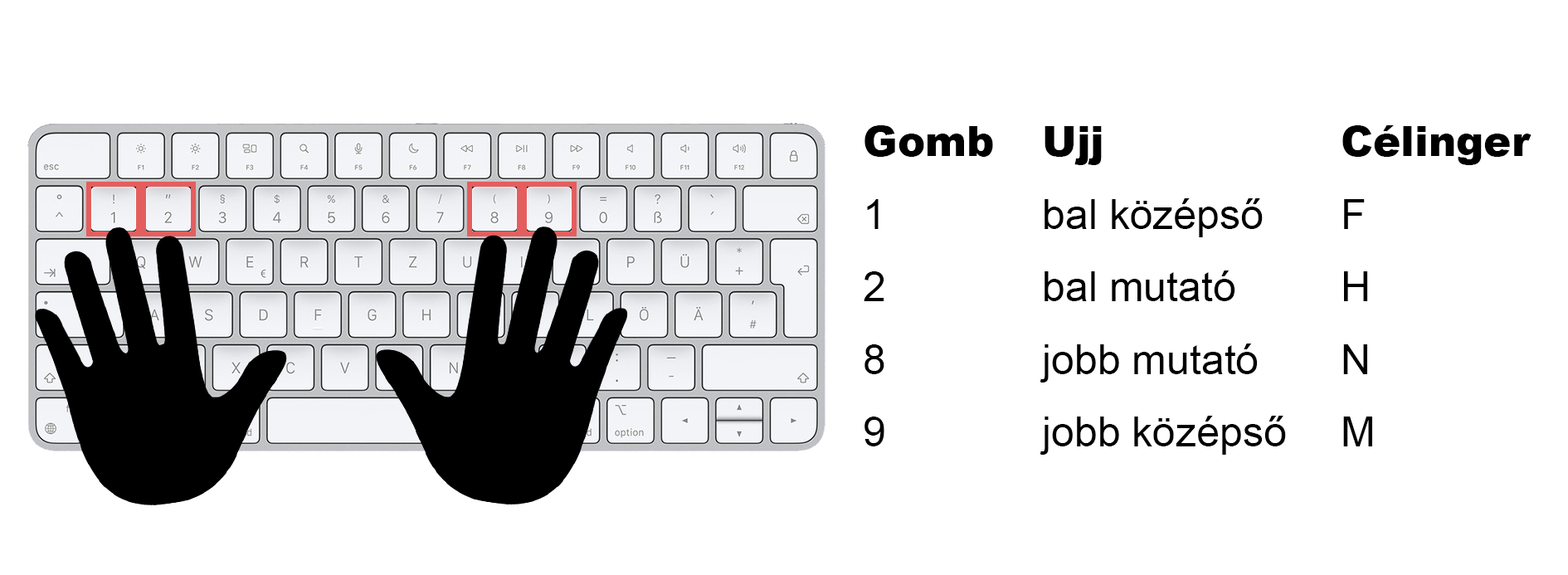
<style>
.page{position:relative;width:1568px;height:575px;background:#ffffff}
.page>*{position:absolute;margin:0}
.t1{font:41.5px/72.6px "ArialMT";color:#000000}
.t2{font:41.5px/72.6px "Arial-Black";color:#000000}
</style>
<div class="page">
<p class="t1" style="left:864px;top:125px;width:667px;height:330px"><span class="t2">Gomb  Ujj        Célinger<br></span>1      bal középső   F<br>2      bal mutató    H<br>8      jobb mutató   N<br>9      jobb középső  M</p>
</div>
